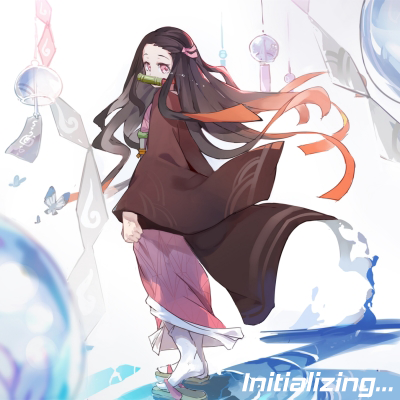
<style>
.page{position:relative;width:400px;height:400px}
.page>*{position:absolute;margin:0}
.t1{font:26.8px "SVN-HemiHead";color:#ffffff}
</style>
<div class="page">
<p class="t1" style="left:242px;top:372px;width:151px;height:25px">Initializing...</p>
</div>
